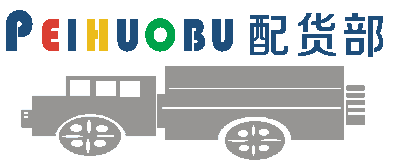
<style>
.page{position:relative;width:406px;height:162px;background:#ffffff}
.page>*{position:absolute;margin:0}
.t1{font:48px "STHupo";letter-spacing:0.1em;color:#1e4e7b;scale:0.9 1}
.t2{font:60px "STHupo";letter-spacing:0.1em;color:#1e4e7b;scale:0.9 1}
.t3{font:48px "STHupo";letter-spacing:0.1em;color:#db3f33;scale:0.9 1}
.t4{font:48px "STHupo";letter-spacing:0.1em;color:#ecbc1c;scale:0.9 1}
.t5{font:48px "STHupo";letter-spacing:0.1em;color:#00a34a;scale:0.9 1}
.t6{font:48px "FZZZHONGJW--GB1-0";letter-spacing:0.1em;color:#1e4e7b;scale:0.9 1}
</style>
<div class="page">
<p class="t1" style="left:6px;top:10px;width:227px;height:42px"><span class="t2">P</span><span class="t3">E</span>I<span class="t4">H</span>U<span class="t5">O</span>BU</p>
<p class="t6" style="left:250px;top:13px;width:133px;height:44px">配货部</p>
</div>
